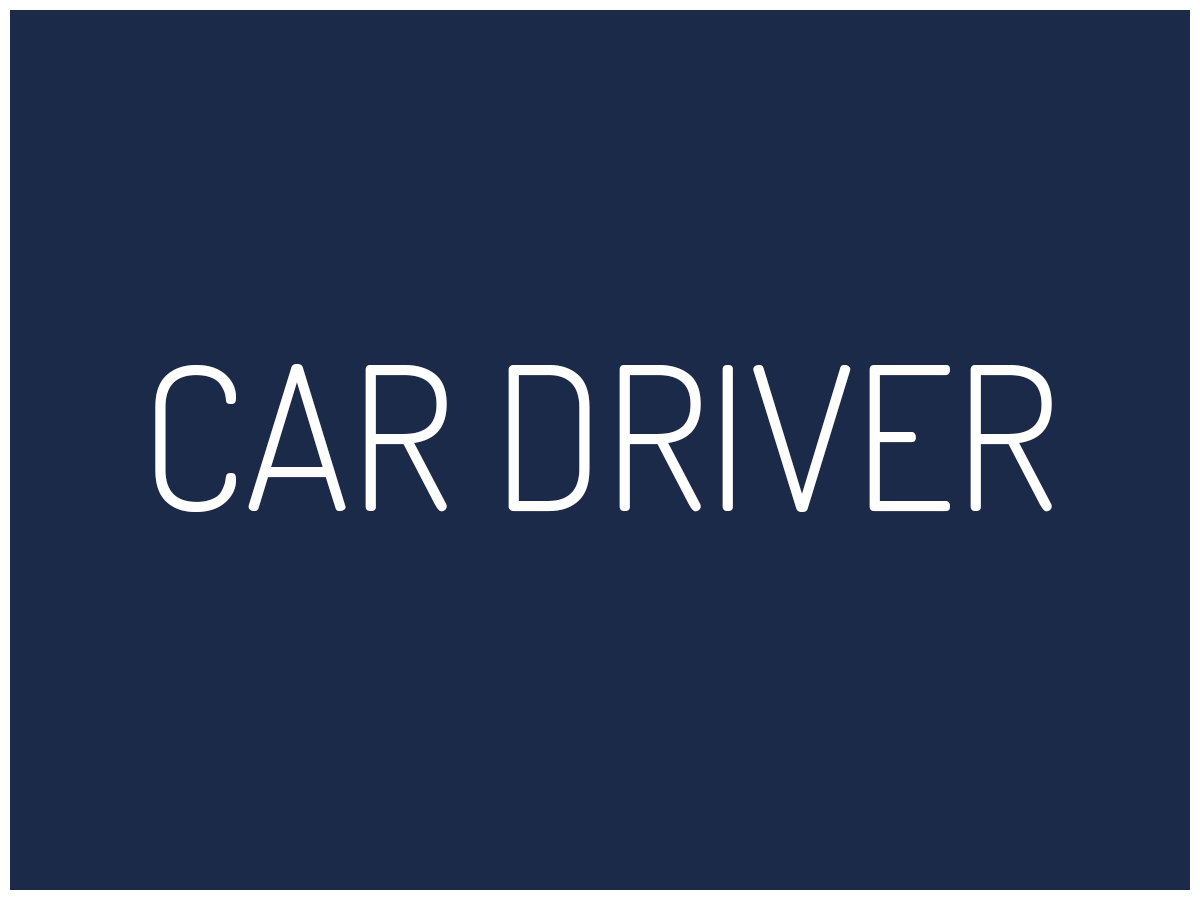
<style>
.page{position:relative;width:1200px;height:900px;background:#1c2a4a}
.page>*{position:absolute;margin:0}
.t1{font:200px "Dosis-Light";color:#ffffff}
</style>
<div class="page">
<p class="t1" style="left:155px;top:364px;width:897px;height:148px">CAR DRIVER</p>
</div>
